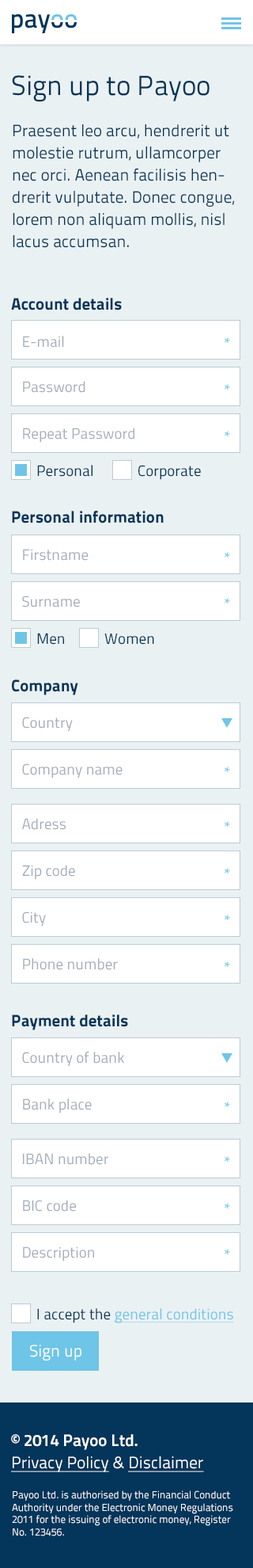
<style>
.page{position:relative;width:253px;height:1568px;background:#eaf1f3}
.page>*{position:absolute;margin:0}
.t1{font:27.7px "TitilliumText25L-400wt";color:#04355a}
.t2{font:16.6px/22.2px "TitilliumText25L-400wt";color:#04355a}
.t3{font:16.6px "TitilliumText25L-999wt";color:#04355a}
.t4{font:15px "TitilliumText25L-400wt";color:#a4adb8}
.t5{font:16.6px "TitilliumText25L-400wt";color:#a4adb8}
.t6{font:16.6px "TitilliumText25L-400wt";color:#6fc5e7}
.t7{font:15px "TitilliumText25L-400wt";color:#04355a}
.t8{font:15px "TitilliumText25L-400wt";color:#6fc5e7;text-decoration:underline}
.t9{font:16.6px "TitilliumText25L-400wt";color:#ffffff}
.t10{font:16.6px/22.2px "TitilliumText25L-800wt";color:#ffffff}
.t11{font:16.6px/22.2px "TitilliumText25L-400wt";color:#ffffff;text-decoration:underline}
.t12{font:16.6px/22.2px "TitilliumText25L-400wt";color:#ffffff}
.t13{font:10.3px "TitilliumText25L-400wt";color:#ffffff}
</style>
<div class="page">
<p class="t1" style="left:12px;top:75px;width:198px;height:27px">Sign up to Payoo</p>
<p class="t2" style="left:13px;top:124px;width:222px;height:124px">Praesent leo arcu, hendrerit ut molestie rutrum, ullamcorper nec orci. Aenean facilisis hendrerit vulputate. Donec congue, lorem non aliquam mollis, nisl lacus accumsan.</p>
<p class="t3" style="left:11px;top:298px;width:111px;height:12px">Account details</p>
<p class="t4" style="left:23px;top:336px;width:41px;height:12px"><span class="t5"><br></span>   E-mail</p>
<p class="t6" style="left:225px;top:337px;width:5px;height:7px">*</p>
<p class="t4" style="left:23px;top:381px;width:63px;height:12px">Password</p>
<p class="t6" style="left:225px;top:384px;width:5px;height:6px">*</p>
<p class="t4" style="left:23px;top:428px;width:112px;height:15px">Repeat Password</p>
<p class="t6" style="left:225px;top:431px;width:5px;height:6px">*</p>
<p class="t7" style="left:37px;top:465px;width:56px;height:12px">Personal</p>
<p class="t7" style="left:139px;top:465px;width:62px;height:15px">Corporate</p>
<p class="t3" style="left:12px;top:511px;width:152px;height:12px">Personal information</p>
<p class="t4" style="left:23px;top:549px;width:66px;height:12px">Firstname</p>
<p class="t6" style="left:225px;top:552px;width:5px;height:6px">*</p>
<p class="t4" style="left:22px;top:596px;width:58px;height:11px">Surname</p>
<p class="t6" style="left:225px;top:598px;width:5px;height:6px">*</p>
<p class="t7" style="left:37px;top:633px;width:27px;height:12px">Men</p>
<p class="t7" style="left:105px;top:634px;width:49px;height:11px">Women</p>
<p class="t3" style="left:12px;top:679px;width:66px;height:16px">Company</p>
<p class="t4" style="left:22px;top:717px;width:51px;height:15px">Country</p>
<p class="t4" style="left:22px;top:763px;width:101px;height:15px">Company name</p>
<p class="t6" style="left:225px;top:767px;width:5px;height:6px">*</p>
<p class="t4" style="left:22px;top:818px;width:44px;height:12px">Adress</p>
<p class="t6" style="left:225px;top:821px;width:5px;height:7px">*</p>
<p class="t4" style="left:22px;top:865px;width:53px;height:15px">Zip code</p>
<p class="t6" style="left:225px;top:868px;width:5px;height:6px">*</p>
<p class="t4" style="left:22px;top:911px;width:24px;height:16px">City</p>
<p class="t6" style="left:225px;top:915px;width:5px;height:6px">*</p>
<p class="t4" style="left:23px;top:958px;width:95px;height:12px">Phone number</p>
<p class="t6" style="left:225px;top:961px;width:5px;height:7px">*</p>
<p class="t3" style="left:12px;top:1014px;width:116px;height:16px">Payment details</p>
<p class="t4" style="left:22px;top:1052px;width:103px;height:15px">Country of bank</p>
<p class="t4" style="left:23px;top:1098px;width:69px;height:15px">Bank place</p>
<p class="t6" style="left:225px;top:1102px;width:5px;height:6px">*</p>
<p class="t4" style="left:23px;top:1153px;width:85px;height:12px">IBAN number</p>
<p class="t6" style="left:225px;top:1156px;width:5px;height:7px">*</p>
<p class="t4" style="left:23px;top:1200px;width:53px;height:12px">BIC code</p>
<p class="t6" style="left:225px;top:1203px;width:5px;height:6px">*</p>
<p class="t4" style="left:23px;top:1246px;width:71px;height:16px">Description</p>
<p class="t6" style="left:225px;top:1249px;width:5px;height:6px">*</p>
<p class="t8" style="left:37px;top:1308px;width:197px;height:15px"><span class="t7">I accept the </span>general conditions</p>
<p class="t9" style="left:30px;top:1345px;width:52px;height:16px">Sign up</p>
<p class="t10" style="left:11px;top:1434px;width:193px;height:38px">© 2014 Payoo Ltd.<br><span class="t11">Privacy Policy</span><span class="t12"> &amp; </span><span class="t11">Disclaimer</span></p>
<p class="t13" style="left:12px;top:1490px;width:222px;height:46px">Payoo Ltd. is authorised by the Financial Conduct Authority under the Electronic Money Regulations 2011 for the issuing of electronic money, Register No. 123456.</p>
</div>
